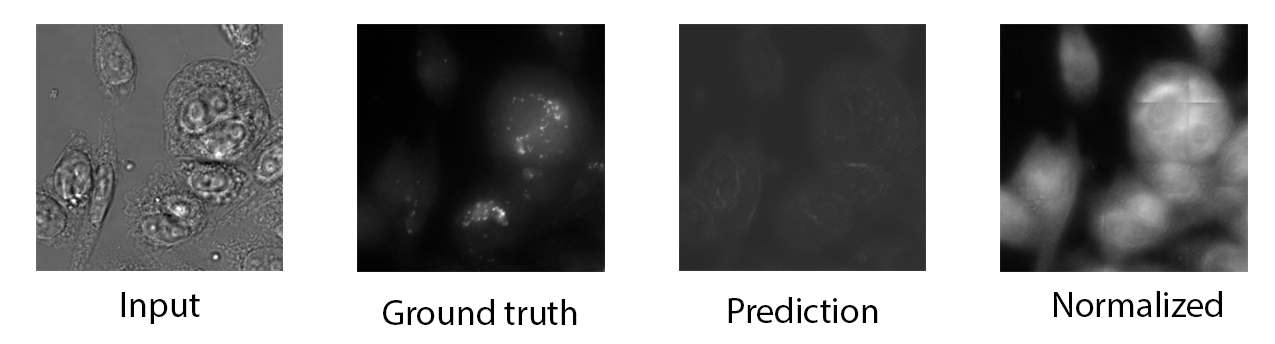
<style>
.page{position:relative;width:1275px;height:344px;background:#ffffff}
.page>*{position:absolute;margin:0}
.t1{font:36px "MyriadPro-Regular";color:#000000}
</style>
<div class="page">
<p class="t1" style="left:121px;top:292px;width:79px;height:32px">Input</p>
<p class="t1" style="left:1054px;top:291px;width:168px;height:26px">Normalized</p>
<p class="t1" style="left:383px;top:299px;width:194px;height:26px">Ground truth</p>
<p class="t1" style="left:728px;top:297px;width:150px;height:26px">Prediction</p>
</div>
